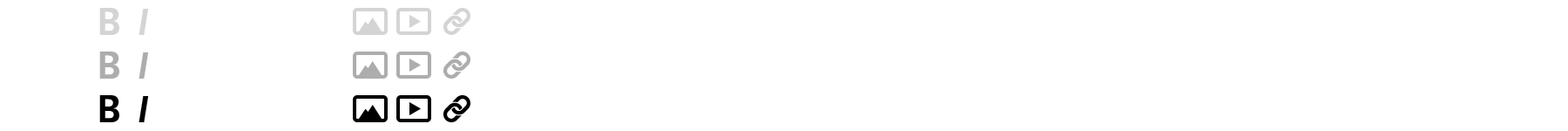
<style>
.page{position:relative;width:1568px;height:131px;background:#ffffff}
.page>*{position:absolute;margin:0}
.t1{font:40.1px "ScalaSansCaps-Bold";color:#d4d4d4;font-variant:small-caps}
.t2{font:40.1px "ScalaSansCaps-BoldItalic";color:#d4d4d4;font-variant:small-caps}
.t3{font:40.1px "ScalaSansCaps-Bold";color:#adadad;font-variant:small-caps}
.t4{font:40.1px "ScalaSansCaps-BoldItalic";color:#adadad;font-variant:small-caps}
.t5{font:40.1px "ScalaSansCaps-Bold";color:#000000;font-variant:small-caps}
.t6{font:40.1px "ScalaSansCaps-BoldItalic";color:#000000;font-variant:small-caps}
</style>
<div class="page">
<p class="t1" style="left:99px;top:8px;width:20px;height:27px">B</p>
<p class="t2" style="left:139px;top:9px;width:10px;height:26px">I</p>
<p class="t3" style="left:99px;top:51px;width:20px;height:27px">B</p>
<p class="t4" style="left:139px;top:52px;width:10px;height:26px">I</p>
<p class="t5" style="left:99px;top:95px;width:20px;height:27px">B</p>
<p class="t6" style="left:139px;top:96px;width:10px;height:26px">I</p>
</div>
